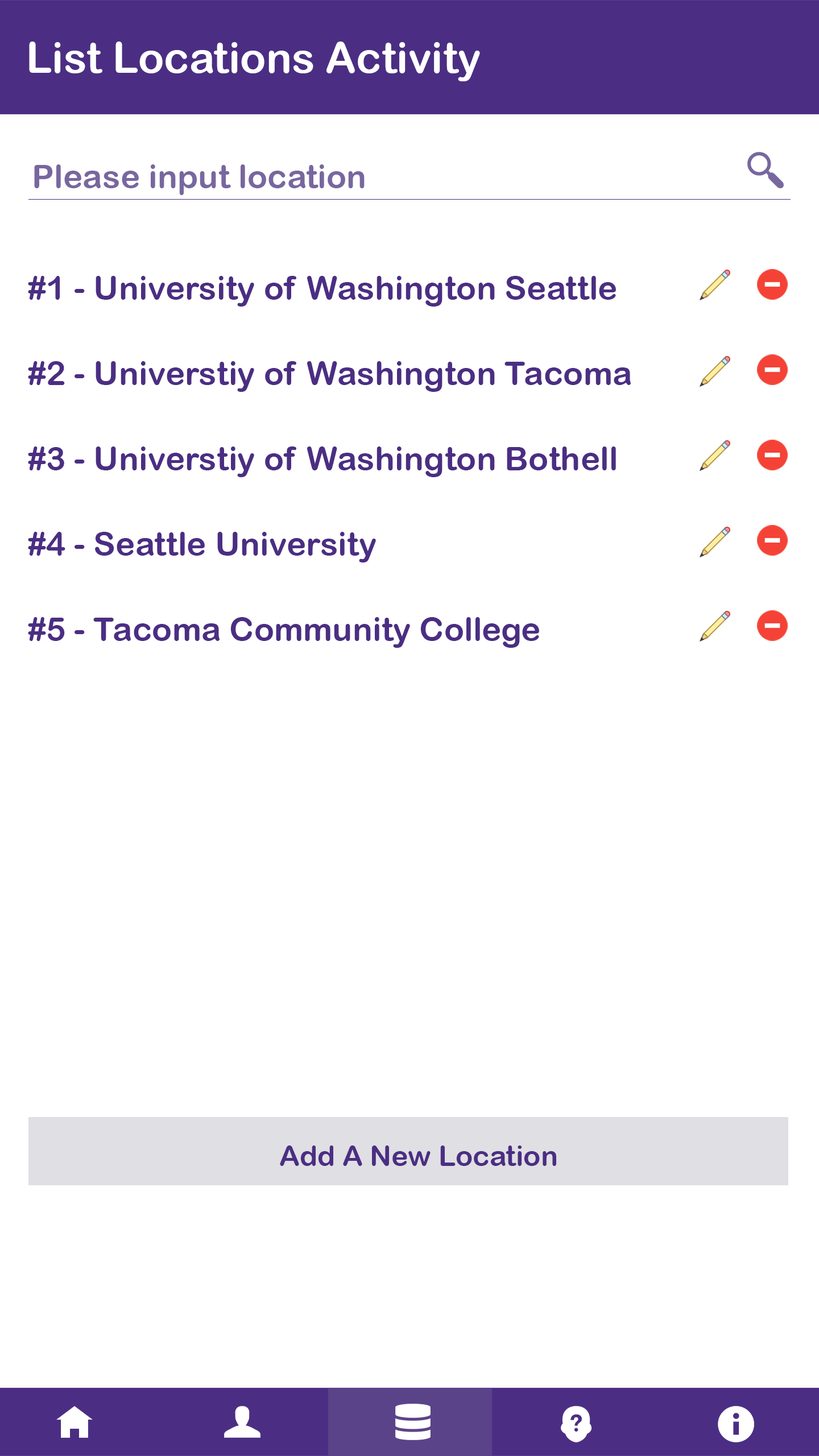
<style>
.page{position:relative;width:819px;height:1456px;background:#ffffff}
.page>*{position:absolute;margin:0}
.t1{font:42.7px "ArialRoundedMTBold";color:#ffffff}
.t2{font:33.2px "ArialRoundedMTBold";color:#78679f}
.t3{font:33.2px "ArialRoundedMTBold";color:#4b2e83}
.t4{font:28.4px "ArialRoundedMTBold";color:#4b2e83}
</style>
<div class="page">
<p class="t1" style="left:29px;top:42px;width:451px;height:39px">List Locations Activity</p>
<p class="t2" style="left:34px;top:164px;width:331px;height:31px">Please input location</p>
<p class="t3" style="left:28px;top:276px;width:588px;height:31px">#1 - University of Washington Seattle</p>
<p class="t3" style="left:28px;top:361px;width:603px;height:31px">#2 - Universtiy of Washington Tacoma</p>
<p class="t3" style="left:28px;top:446px;width:588px;height:31px">#3 - Universtiy of Washington Bothell</p>
<p class="t3" style="left:28px;top:532px;width:348px;height:30px">#4 - Seattle University</p>
<p class="t3" style="left:28px;top:617px;width:511px;height:31px">#5 - Tacoma Community College</p>
<p class="t4" style="left:280px;top:1145px;width:276px;height:21px">Add A New Location</p>
</div>
